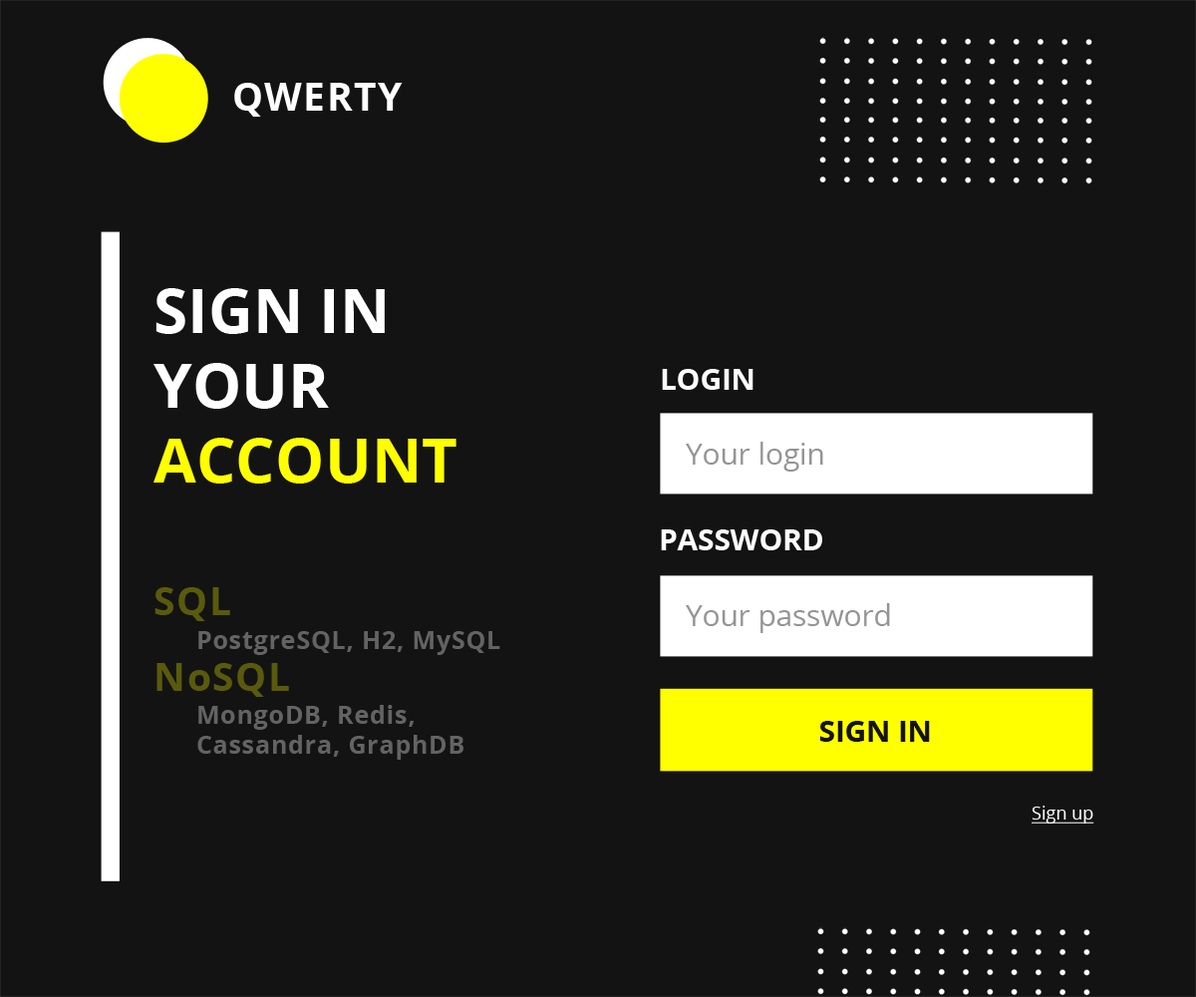
<style>
.page{position:relative;width:1196px;height:997px;background:#131313}
.page>*{position:absolute;margin:0}
.t1{font:38.7px "OpenSans-Bold";letter-spacing:0.04em;color:#ffffff}
.t2{font:62.1px "OpenSans-Bold";color:#ffffff;text-transform:uppercase}
.t3{font:62.1px "OpenSans-Bold";color:#ffff00;text-transform:uppercase}
.t4{font:29.5px "OpenSans-Bold";color:#fefeff;text-transform:uppercase}
.t5{font:29.5px "OpenSans-Regular";color:#949494}
.t6{font:38.7px "OpenSans-Bold";letter-spacing:0.04em;color:#5a5a0d}
.t7{font:24.6px "OpenSans-Bold";letter-spacing:0.04em;color:#636363}
.t8{font:29.5px "OpenSans-Bold";color:#131313;text-transform:uppercase}
.t9{font:17.9px "OpenSans-Regular";color:#ffffff;text-decoration:underline}
</style>
<div class="page">
<p class="t1" style="left:234px;top:83px;width:169px;height:34px">QWERTY</p>
<p class="t2" style="left:154px;top:288px;width:303px;height:195px">Sign in <br>your<br><span class="t3">account</span></p>
<p class="t4" style="left:662px;top:369px;width:92px;height:21px">LOGIN</p>
<p class="t5" style="left:686px;top:442px;width:137px;height:30px">Your login</p>
<p class="t4" style="left:661px;top:529px;width:161px;height:21px">PASSWORD</p>
<p class="t6" style="left:155px;top:587px;width:75px;height:34px">SQL</p>
<p class="t5" style="left:686px;top:603px;width:204px;height:30px">Your password</p>
<p class="t7" style="left:198px;top:631px;width:302px;height:24px">PostgreSQL, H2, MySQL</p>
<p class="t6" style="left:157px;top:663px;width:132px;height:34px">NoSQL</p>
<p class="t7" style="left:197px;top:705px;width:267px;height:55px">MongoDB, Redis,<br>Cassandra, GraphDB</p>
<p class="t8" style="left:819px;top:721px;width:111px;height:21px">SIGN IN</p>
<p class="t9" style="left:1032px;top:805px;width:63px;height:18px">Sign up</p>
</div>
